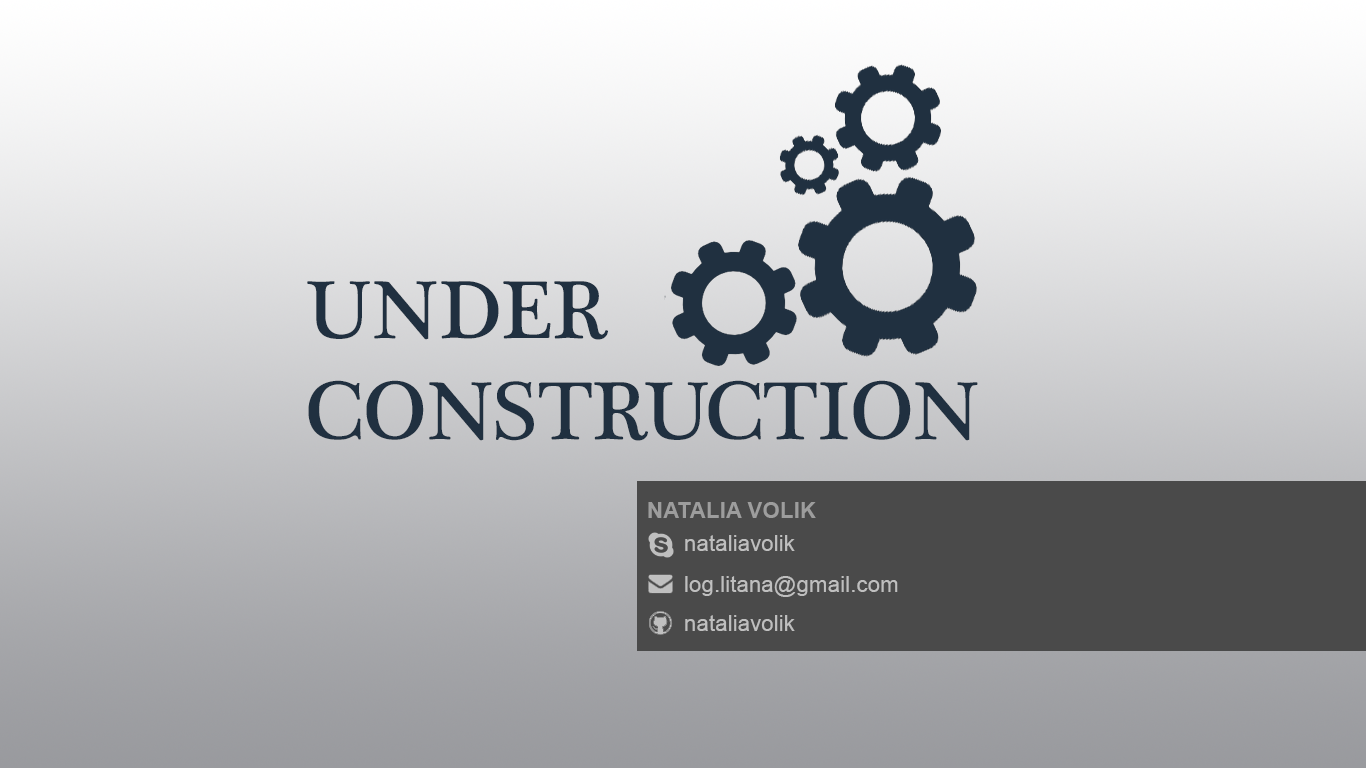
<style>
.page{position:relative;width:1366px;height:768px}
.page>*{position:absolute;margin:0}
.t1{font:84.3px "PlantagenetCherokee";color:#203040}
.t2{font:22.3px "Arial-BoldMT";color:#9d9d9d}
.t3{font:22.3px "ArialMT";color:#bfbfbf}
</style>
<div class="page">
<p class="t1" style="left:307px;top:281px;width:671px;height:160px">UNDER<br>CONSTRUCTION</p>
<p class="t2" style="left:648px;top:502px;width:168px;height:16px">NATALIA VOLIK</p>
<p class="t3" style="left:685px;top:535px;width:110px;height:16px">nataliavolik</p>
<p class="t3" style="left:685px;top:576px;width:213px;height:21px">log.litana@gmail.com</p>
<p class="t3" style="left:685px;top:615px;width:110px;height:16px">nataliavolik</p>
</div>
